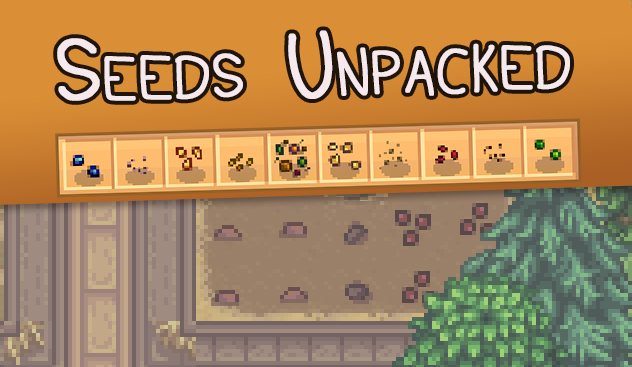
<style>
.page{position:relative;width:632px;height:367px}
.page>*{position:absolute;margin:0}
.t1{font:96px "Dudu_Calligraphy";letter-spacing:-0.025em;color:#f5e9ee;font-variant:small-caps;font-weight:bold;scale:0.9 1}
</style>
<div class="page">
<p class="t1" style="left:57px;top:30px;width:513px;height:71px;rotate:-2deg">Seeds Unpacked</p>
</div>
